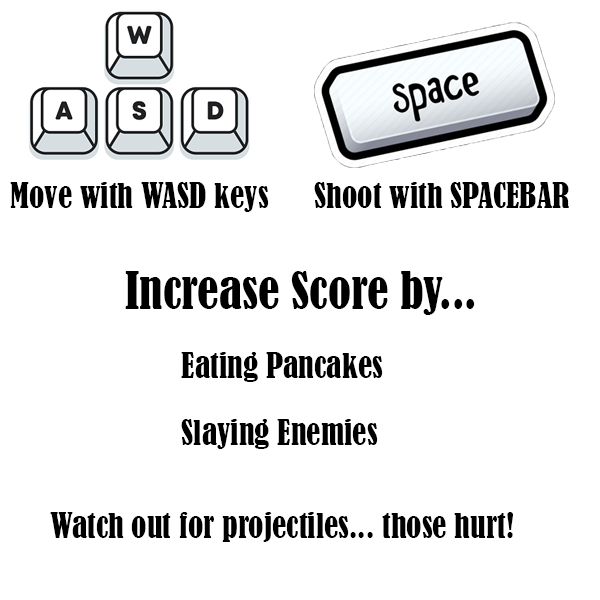
<style>
.page{position:relative;width:600px;height:600px;background:#ffffff}
.page>*{position:absolute;margin:0}
.t1{font:32px "BernardMT-Condensed";color:#000000}
.t2{font:48px "BernardMT-Condensed";color:#000000}
</style>
<div class="page">
<p class="t1" style="left:10px;top:182px;width:259px;height:30px">Move with WASD keys</p>
<p class="t1" style="left:314px;top:182px;width:255px;height:26px">Shoot with SPACEBAR</p>
<p class="t2" style="left:125px;top:271px;width:350px;height:44px">Increase Score by...</p>
<p class="t1" style="left:181px;top:352px;width:202px;height:30px">Eating Pancakes</p>
<p class="t1" style="left:181px;top:419px;width:197px;height:30px">Slaying Enemies</p>
<p class="t1" style="left:50px;top:512px;width:463px;height:30px">Watch out for projectiles... those hurt!</p>
</div>
